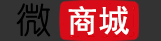
<style>
.page{position:relative;width:161px;height:41px;background:#333333}
.page>*{position:absolute;margin:0}
.t1{font:35px "YouYuan";color:#000000;font-weight:bold}
.t2{font:31px "SimHei";color:#ffffff;font-weight:bold}
</style>
<div class="page">
<p class="t1" style="left:16px;top:3px;width:35px;height:34px">微</p>
<p class="t2" style="left:68px;top:6px;width:61px;height:29px">商城</p>
</div>
